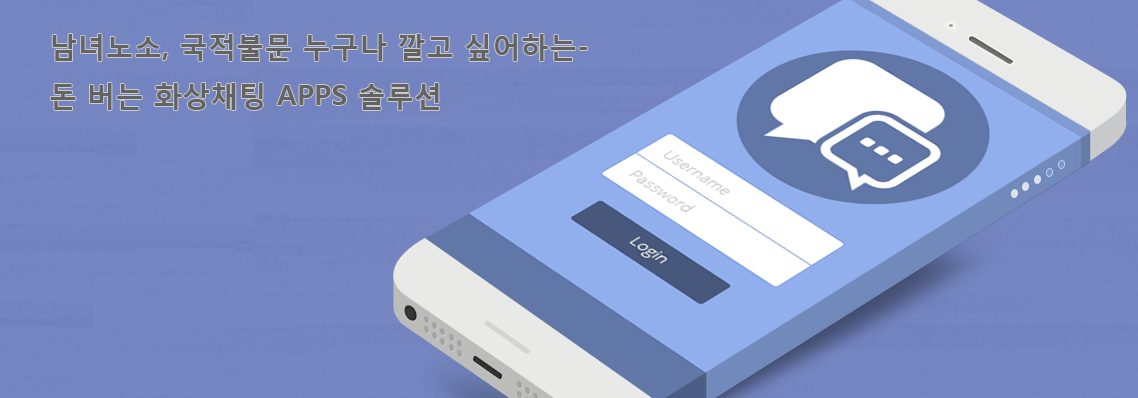
<style>
.page{position:relative;width:1138px;height:398px}
.page>*{position:absolute;margin:0}
.t1{font:28.3px/49px "MalgunGothicBold";color:#636363}
</style>
<div class="page">
<p class="t1" style="left:50px;top:34px;width:538px;height:76px">남녀노소, 국적불문 누구나 깔고 싶어하는-<br>돈 버는 화상채팅 APPS 솔루션</p>
</div>
